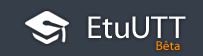
<style>
.page{position:relative;width:203px;height:56px;background:#363e49}
.page>*{position:absolute;margin:0}
.t1{font:32px "MyriadWebPro";color:#ffffff}
.t2{font:13px "MyriadWebPro";color:#ff8a00}
</style>
<div class="page">
<p class="t1" style="left:88px;top:16px;width:98px;height:23px">EtuUTT</p>
<p class="t2" style="left:156px;top:40px;width:24px;height:10px">Bêta</p>
</div>
